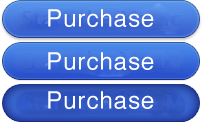
<style>
.page{position:relative;width:202px;height:126px}
.page>*{position:absolute;margin:0}
.t1{font:24px "Helvetica";letter-spacing:0.04em;color:#ffffff}
</style>
<div class="page">
<p class="t1" style="left:48px;top:9px;width:106px;height:18px">Purchase</p>
<p class="t1" style="left:48px;top:52px;width:106px;height:18px">Purchase</p>
<p class="t1" style="left:48px;top:91px;width:106px;height:18px">Purchase</p>
</div>
